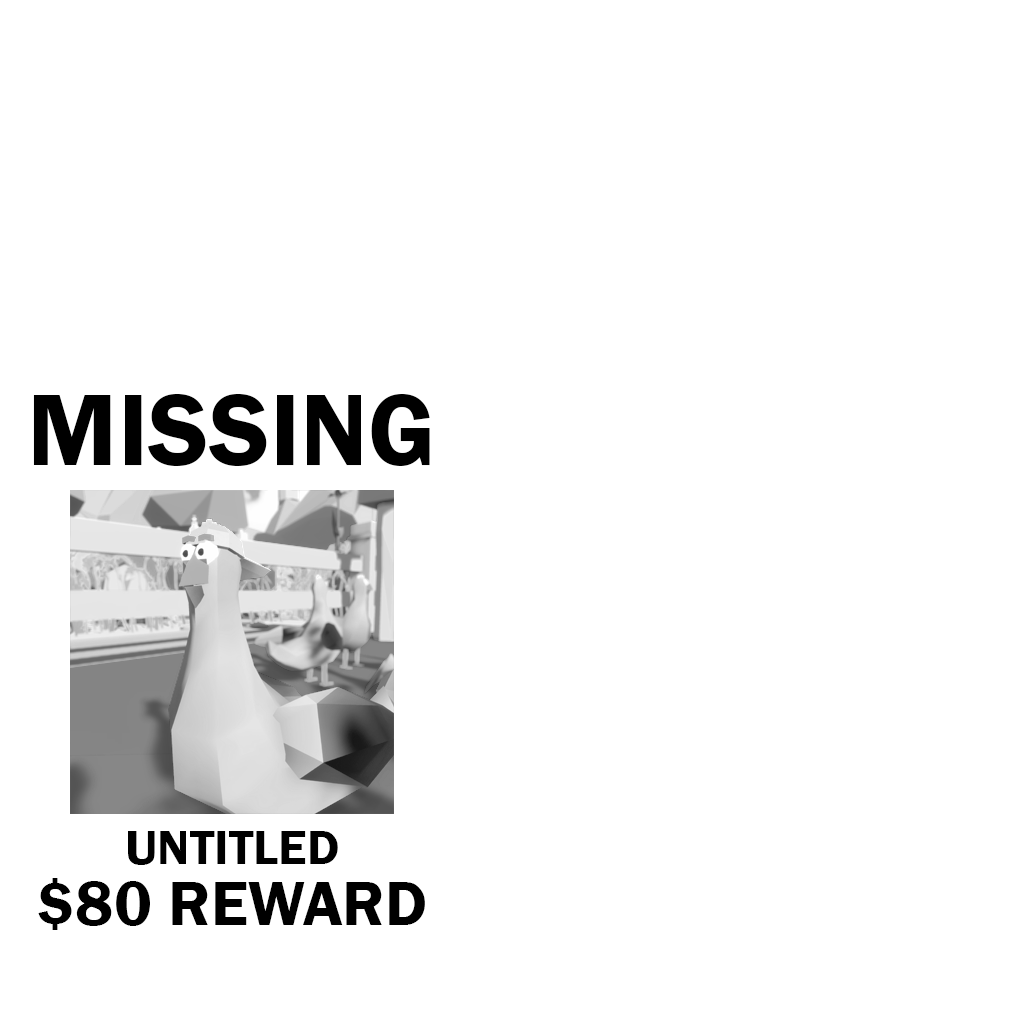
<style>
.page{position:relative;width:1024px;height:1024px;background:#ffffff}
.page>*{position:absolute;margin:0}
.t1{font:105px "FranklinGothic-Demi";color:#000000}
.t2{font:50px "FranklinGothic-Demi";color:#000000}
.t3{font:65px "FranklinGothic-Demi";color:#000000}
</style>
<div class="page">
<p class="t1" style="left:33px;top:394px;width:397px;height:72px">MISSING</p>
<p class="t2" style="left:128px;top:831px;width:210px;height:34px">UNTITLED</p>
<p class="t3" style="left:38px;top:878px;width:387px;height:52px">$80 REWARD</p>
</div>
